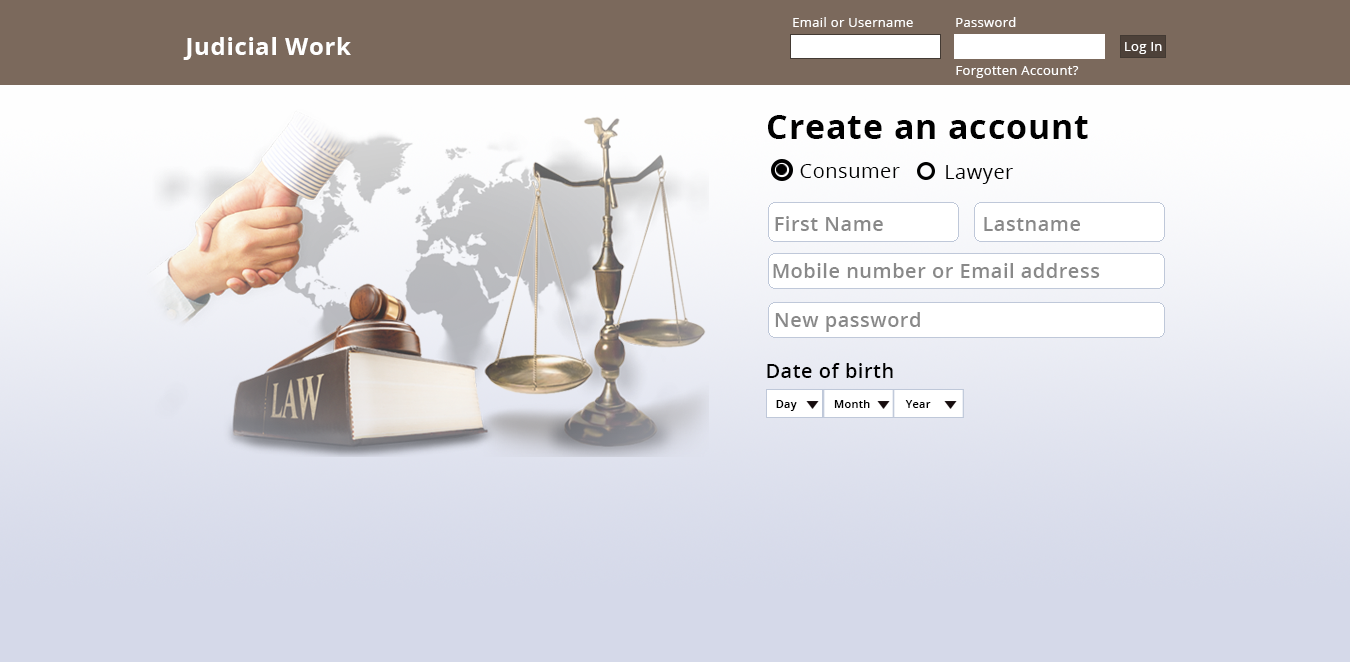
<style>
.page{position:relative;width:1350px;height:662px}
.page>*{position:absolute;margin:0}
.t1{font:13px "OpenSans";letter-spacing:0.025em;color:#ffffff}
.t2{font:24px "OpenSans-Bold";letter-spacing:0.025em;color:#ffffff}
.t3{font:13px "OpenSans";letter-spacing:0.025em;color:#7b695c}
.t4{font:34px "OpenSans-Bold";letter-spacing:0.025em;color:#010101}
.t5{font:20px "OpenSans";letter-spacing:0.025em;color:#000000}
.t6{font:20px "OpenSans-Semibold";letter-spacing:0.025em;color:#898989}
.t7{font:20px "OpenSans-Semibold";letter-spacing:0.025em;color:#000000}
.t8{font:11px "OpenSans-Semibold";letter-spacing:0.025em;color:#000000}
</style>
<div class="page">
<p class="t1" style="left:793px;top:17px;width:120px;height:10px">Email or Username</p>
<p class="t1" style="left:956px;top:17px;width:60px;height:10px">Password</p>
<p class="t2" style="left:183px;top:37px;width:168px;height:23px">Judicial Work</p>
<p class="t1" style="left:1125px;top:42px;width:37px;height:12px">Log In</p>
<p class="t1" style="left:956px;top:65px;width:134px;height:13px">Forgotten Account? <span class="t3">h</span></p>
<p class="t4" style="left:768px;top:115px;width:320px;height:24px">Create an account</p>
<p class="t5" style="left:800px;top:164px;width:100px;height:14px">Consumer</p>
<p class="t5" style="left:946px;top:165px;width:67px;height:19px">Lawyer</p>
<p class="t6" style="left:775px;top:216px;width:108px;height:15px">First Name</p>
<p class="t6" style="left:984px;top:217px;width:96px;height:14px">Lastname</p>
<p class="t6" style="left:773px;top:263px;width:327px;height:15px">Mobile number or Email address</p>
<p class="t6" style="left:775px;top:312px;width:145px;height:20px">New password</p>
<p class="t7" style="left:767px;top:363px;width:126px;height:15px">Date of birth</p>
<p class="t8" style="left:776px;top:400px;width:21px;height:11px">Day</p>
<p class="t8" style="left:834px;top:400px;width:36px;height:8px">Month</p>
<p class="t8" style="left:905px;top:400px;width:26px;height:8px">Year</p>
</div>
